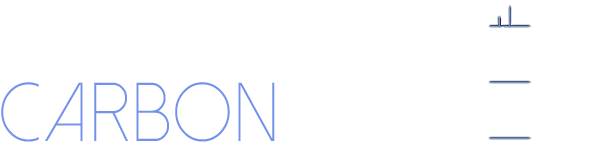
<style>
.page{position:relative;width:589px;height:147px;background:#ffffff}
.page>*{position:absolute;margin:0}
.t1{font:83px "DolceVitaLight";letter-spacing:0.05em;color:#7392ec;scale:0.92 1}
</style>
<div class="page">
<p class="t1" style="left:1px;top:82px;width:274px;height:60px">CARBON</p>
</div>
